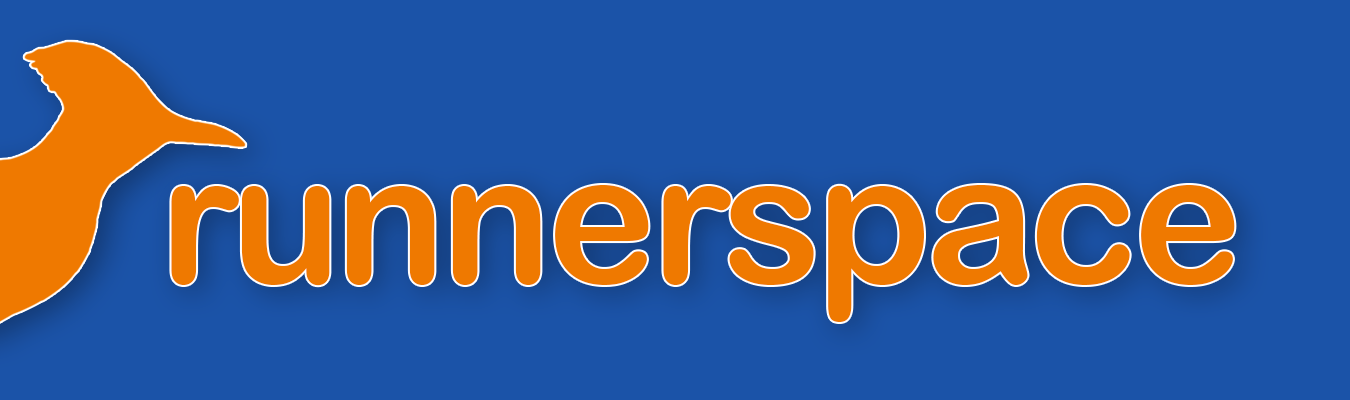
<style>
.page{position:relative;width:1350px;height:400px;background:#1b53a8}
.page>*{position:absolute;margin:0}
.t1{font:184.3px "ArialRoundedMTBold";letter-spacing:-0.03em;color:#ef7900}
</style>
<div class="page">
<p class="t1" style="left:171px;top:185px;width:1064px;height:137px">runnerspace</p>
</div>
